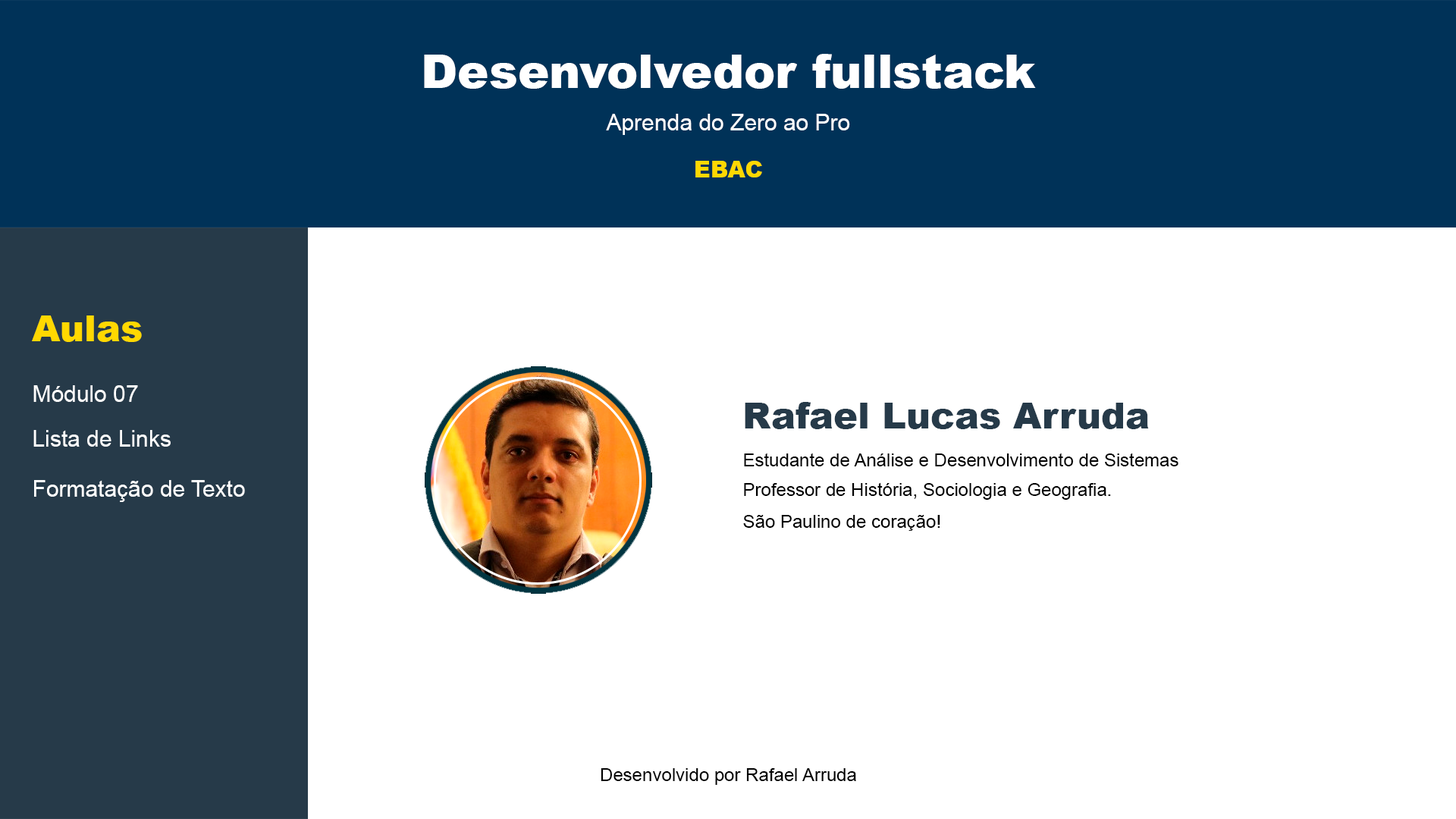
<style>
.page{position:relative;width:1456px;height:819px;background:#ffffff}
.page>*{position:absolute;margin:0}
.t1{font:47px "Arial-Black";color:#ffffff}
.t2{font:22.7px "ArialMT";color:#ffffff}
.t3{font:22.7px "Arial-Black";color:#ffd800}
.t4{font:36.4px "Arial-Black";color:#ffd800}
.t5{font:36.4px "Arial-Black";color:#263a49}
.t6{font:18.2px "ArialMT";color:#000000}
</style>
<div class="page">
<p class="t1" style="left:424px;top:54px;width:612px;height:35px">Desenvolvedor fullstack</p>
<p class="t2" style="left:606px;top:114px;width:244px;height:21px">Aprenda do Zero ao Pro</p>
<p class="t3" style="left:695px;top:161px;width:67px;height:16px">EBAC</p>
<p class="t4" style="left:32px;top:315px;width:110px;height:27px">Aulas</p>
<p class="t2" style="left:33px;top:385px;width:105px;height:17px">Módulo 07</p>
<p class="t5" style="left:745px;top:402px;width:404px;height:27px">Rafael Lucas Arruda</p>
<p class="t2" style="left:33px;top:430px;width:138px;height:17px">Lista de Links</p>
<p class="t6" style="left:744px;top:453px;width:434px;height:13px">Estudante de Análise e Desenvolvimento de Sistemas</p>
<p class="t2" style="left:34px;top:480px;width:211px;height:22px">Formatação de Texto</p>
<p class="t6" style="left:744px;top:482px;width:367px;height:18px">Professor de História, Sociologia e Geografia.</p>
<p class="t6" style="left:743px;top:515px;width:197px;height:16px">São Paulino de coração!</p>
<p class="t6" style="left:601px;top:768px;width:255px;height:17px">Desenvolvido por Rafael Arruda</p>
</div>
